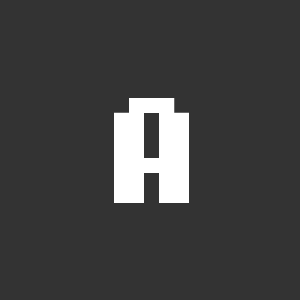
<style>
.page{position:relative;width:300px;height:300px;background:#333333}
.page>*{position:absolute;margin:0}
.t1{font:150px "Hardpixel";color:#ffffff}
</style>
<div class="page">
<p class="t1" style="left:114px;top:98px;width:75px;height:105px">A</p>
</div>
